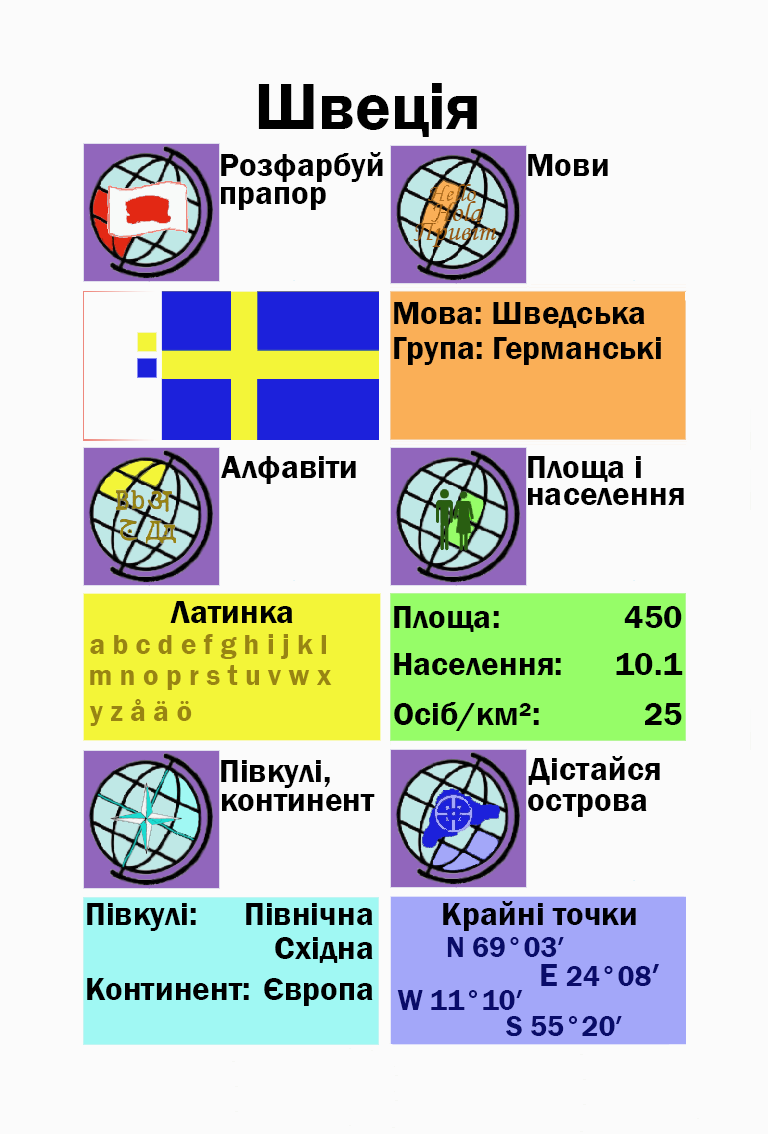
<style>
.page{position:relative;width:768px;height:1134px;background:#fbfbfb}
.page>*{position:absolute;margin:0}
.t1{font:66.7px "FranklinGothic-Demi";color:#000000}
.t2{font:33.3px "FranklinGothic-Demi";color:#000000}
.t3{font:33.3px "FranklinGothic-Demi";color:#000003}
.t4{font:29.2px "FranklinGothic-Demi";color:#988413}
.t5{font:29.2px "FranklinGothic-Demi";color:#090c69}
.t6{font:33.3px "FranklinGothic-Demi";color:#090c69}
</style>
<div class="page">
<p class="t1" style="left:258px;top:83px;width:219px;height:54px">Швеція</p>
<p class="t2" style="left:221px;top:152px;width:162px;height:30px">Розфарбуй</p>
<p class="t2" style="left:528px;top:154px;width:80px;height:22px">Мови</p>
<p class="t2" style="left:221px;top:187px;width:105px;height:23px">прапор</p>
<p class="t2" style="left:394px;top:302px;width:251px;height:26px">Мова: Шведська</p>
<p class="t2" style="left:394px;top:337px;width:267px;height:28px">Група: Германські</p>
<p class="t2" style="left:221px;top:456px;width:135px;height:28px">Алфавіти</p>
<p class="t2" style="left:528px;top:456px;width:113px;height:26px">Площа і</p>
<p class="t2" style="left:528px;top:488px;width:156px;height:17px">населення</p>
<p class="t2" style="left:170px;top:601px;width:123px;height:22px">Латинка</p>
<p class="t2" style="left:394px;top:606px;width:105px;height:26px">Площа:</p>
<p class="t3" style="left:624px;top:606px;width:58px;height:22px">450</p>
<p class="t4" style="left:90px;top:634px;width:236px;height:25px">a b c d e f g h i j k l</p>
<p class="t2" style="left:394px;top:653px;width:167px;height:22px">Населення:</p>
<p class="t2" style="left:616px;top:653px;width:67px;height:22px">10.1</p>
<p class="t4" style="left:90px;top:665px;width:242px;height:25px">m n o p r s t u v w x</p>
<p class="t4" style="left:89px;top:699px;width:103px;height:27px">y z å ä ö</p>
<p class="t2" style="left:394px;top:702px;width:145px;height:29px">Осіб/км²:</p>
<p class="t2" style="left:645px;top:703px;width:37px;height:22px">25</p>
<p class="t2" style="left:221px;top:760px;width:109px;height:28px">Півкулі,</p>
<p class="t2" style="left:528px;top:756px;width:132px;height:29px">Дістайся</p>
<p class="t2" style="left:222px;top:794px;width:153px;height:17px">континент</p>
<p class="t2" style="left:528px;top:794px;width:119px;height:23px">острова</p>
<p class="t2" style="left:87px;top:903px;width:109px;height:28px">Півкулі:</p>
<p class="t2" style="left:246px;top:903px;width:127px;height:22px">Північна</p>
<p class="t3" style="left:443px;top:901px;width:193px;height:30px">Крайні точки</p>
<p class="t2" style="left:275px;top:937px;width:98px;height:26px">Східна</p>
<p class="t5" style="left:447px;top:937px;width:117px;height:20px">N 69°03′</p>
<p class="t5" style="left:541px;top:964px;width:118px;height:22px"><span class="t6">E </span>24°08<span class="t6">′</span></p>
<p class="t2" style="left:87px;top:978px;width:162px;height:22px">Континент:</p>
<p class="t2" style="left:264px;top:978px;width:109px;height:28px">Європа</p>
<p class="t5" style="left:397px;top:990px;width:126px;height:20px">W 11°10′</p>
<p class="t5" style="left:506px;top:1016px;width:116px;height:21px">S 55°20′</p>
</div>
